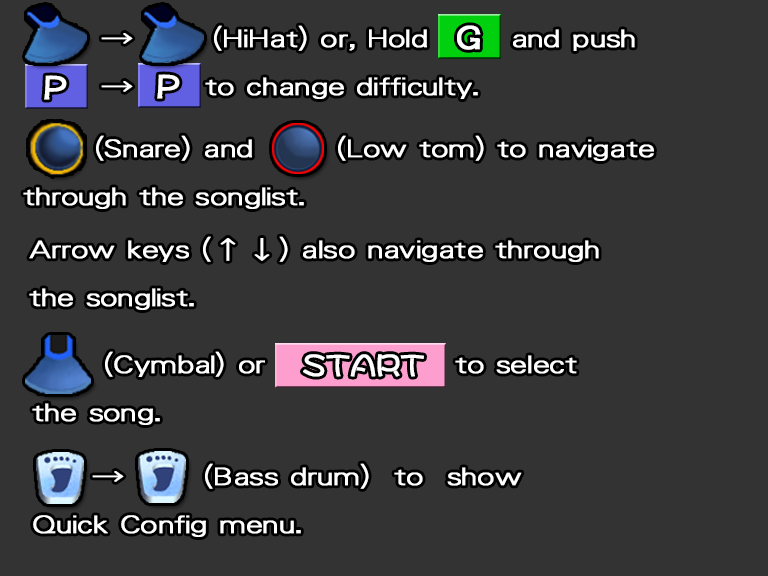
<style>
.page{position:relative;width:768px;height:576px;background:#333333}
.page>*{position:absolute;margin:0}
.t1{font:24.8px/48px "DFGothicP-W3-WING-RKSJ-H";color:#ffffff;font-weight:bold;scale:1.33 1}
.t2{font:30px "DFPOPClip-W7-WINP-RKSJ-H";color:#ffffff;font-weight:bold}
.t3{font:30px "DFMaruMojiSQ-W5-WINP-RKSJ-H";color:#ffffff;font-weight:bold}
</style>
<div class="page">
<p class="t1" style="left:101px;top:25px;width:534px;height:74px">→   (HiHat) or, Hold       and push<br>      →      to change difficulty.</p>
<p class="t2" style="left:457px;top:25px;width:24px;height:25px">G</p>
<p class="t2" style="left:44px;top:75px;width:23px;height:25px">P</p>
<p class="t2" style="left:157px;top:74px;width:23px;height:25px">P</p>
<p class="t1" style="left:23px;top:135px;width:631px;height:74px">(Snare) and       (Low tom) to navigate<br>through the songlist.</p>
<p class="t1" style="left:29px;top:236px;width:570px;height:74px">Arrow keys (↑↓) also navigate through<br>the songlist.</p>
<p class="t1" style="left:32px;top:351px;width:545px;height:74px">(Cymbal) or                to select<br>the song.</p>
<p class="t3" style="left:303px;top:354px;width:121px;height:23px">START</p>
<p class="t1" style="left:33px;top:463px;width:489px;height:74px">→   (Bass drum)  to  show<br>Quick Config menu.</p>
</div>
